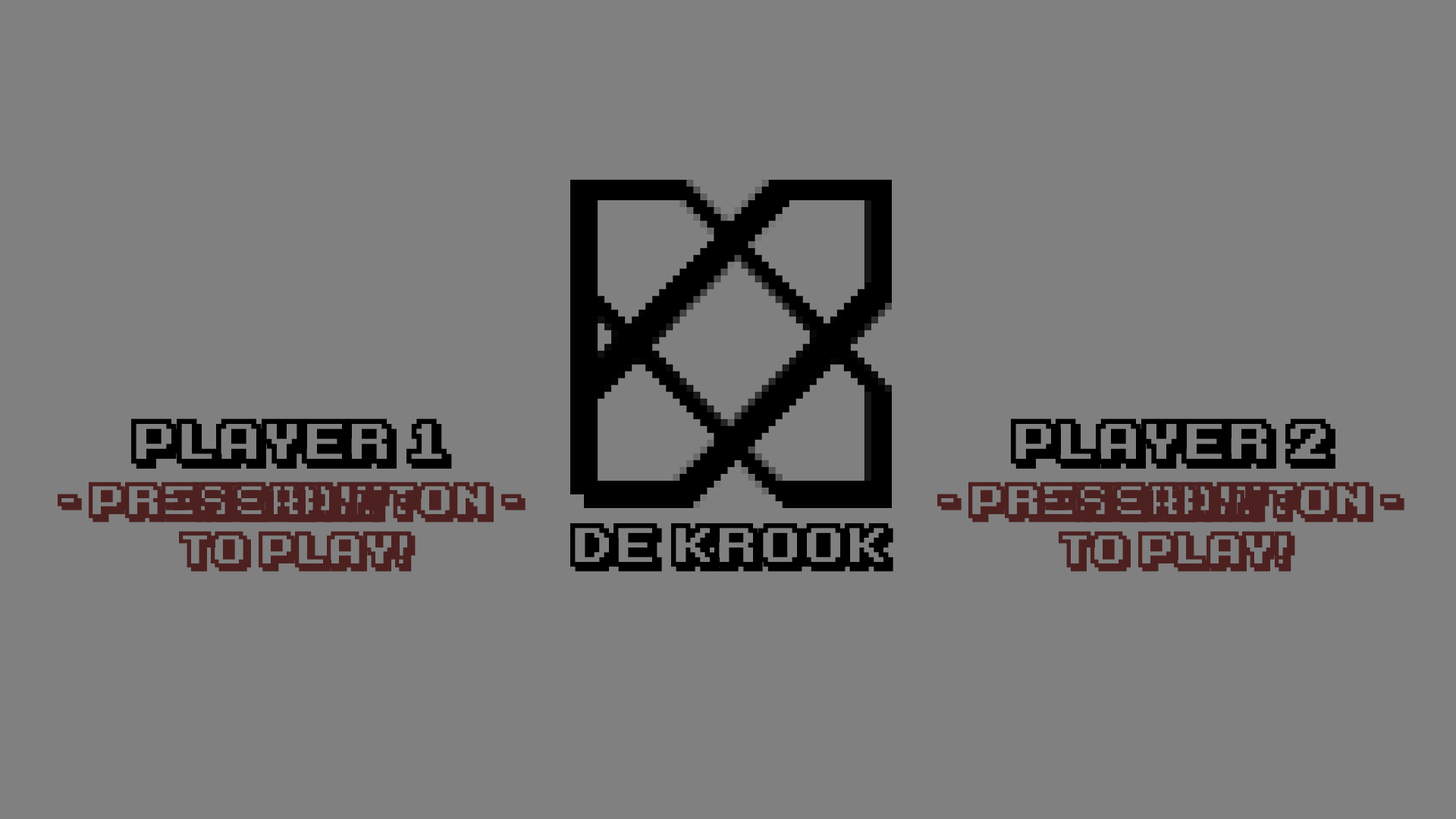
<style>
.page{position:relative;width:1456px;height:819px;background:#808080}
.page>*{position:absolute;margin:0}
.t1{font:51.2px "KarmaticArcade";color:#000000}
.t2{font:41px "KarmaticArcade";color:#4e2121}
.t3{font:49.5px "KarmaticArcade";color:#000000}
</style>
<div class="page">
<p class="t1" style="left:131px;top:419px;width:321px;height:50px">Player 1</p>
<p class="t1" style="left:1011px;top:419px;width:324px;height:50px">Player 2</p>
<p class="t2" style="left:58px;top:482px;width:468px;height:90px;text-align:center">- Press Button -<br> to play!</p>
<p class="t2" style="left:162px;top:482px;width:259px;height:40px">- Ready! -</p>
<p class="t2" style="left:937px;top:482px;width:467px;height:90px;text-align:center">- Press Button -<br> to play!</p>
<p class="t2" style="left:1041px;top:482px;width:260px;height:40px">- Ready! -</p>
<p class="t3" style="left:570px;top:523px;width:323px;height:49px">DE Krook</p>
</div>
